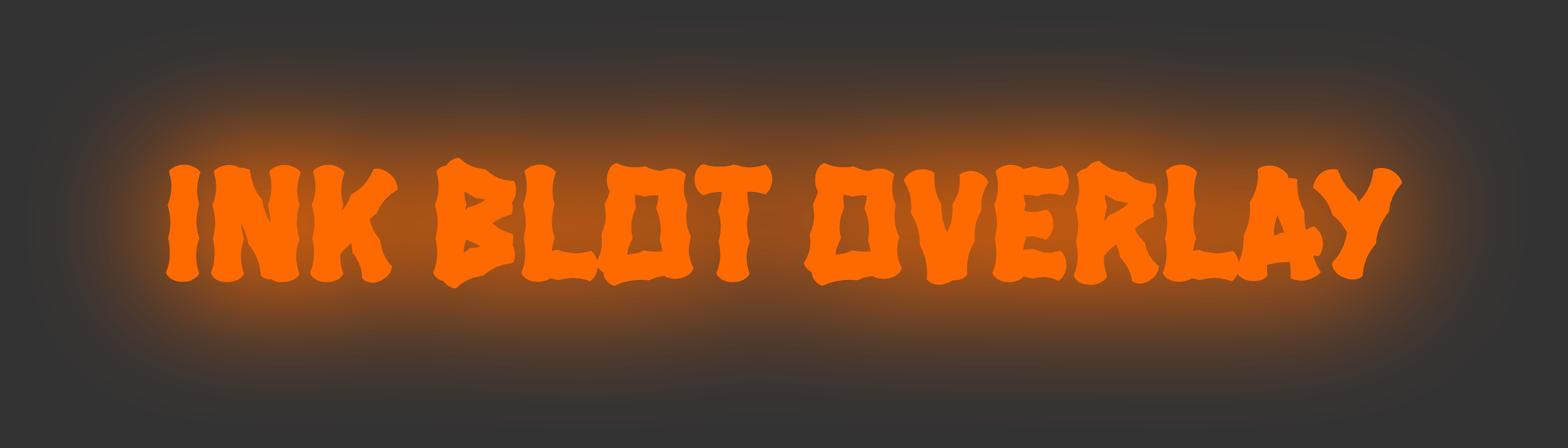
<style>
.page{position:relative;width:1568px;height:448px}
.page>*{position:absolute;margin:0}
.t1{font:166.1px "HanaleiFill-Regular";color:#ff6a00}
</style>
<div class="page">
<p class="t1" style="left:166px;top:158px;width:1236px;height:130px">INK BLOT OVERLAY</p>
</div>
